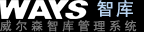
<style>
.page{position:relative;width:144px;height:32px;background:#000000}
.page>*{position:absolute;margin:0}
.t1{font:18px "SimHei";letter-spacing:0.1em;color:#b8d3ef}
.t2{font:12px "SimHei";letter-spacing:0.3em;color:#7a7a7a}
</style>
<div class="page">
<p class="t1" style="left:97px;top:0px;width:36px;height:17px">智库</p>
<p class="t2" style="left:0px;top:20px;width:137px;height:12px">威尔森智库管理系统</p>
</div>
